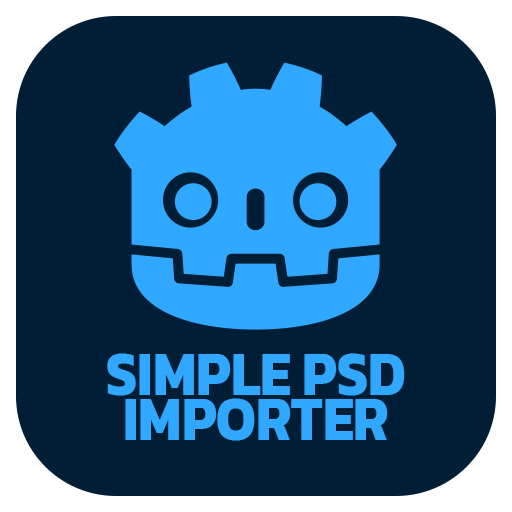
<style>
.page{position:relative;width:512px;height:512px;background:#001e36}
.page>*{position:absolute;margin:0}
.t1{font:64.4px/45.4px "Kanit-Bold";color:#31a8ff;scale:0.87 1}
</style>
<div class="page">
<p class="t1" style="left:107px;top:353px;width:298px;height:88px;text-align:center">SIMPLE PSD<br>IMPORTER</p>
</div>
